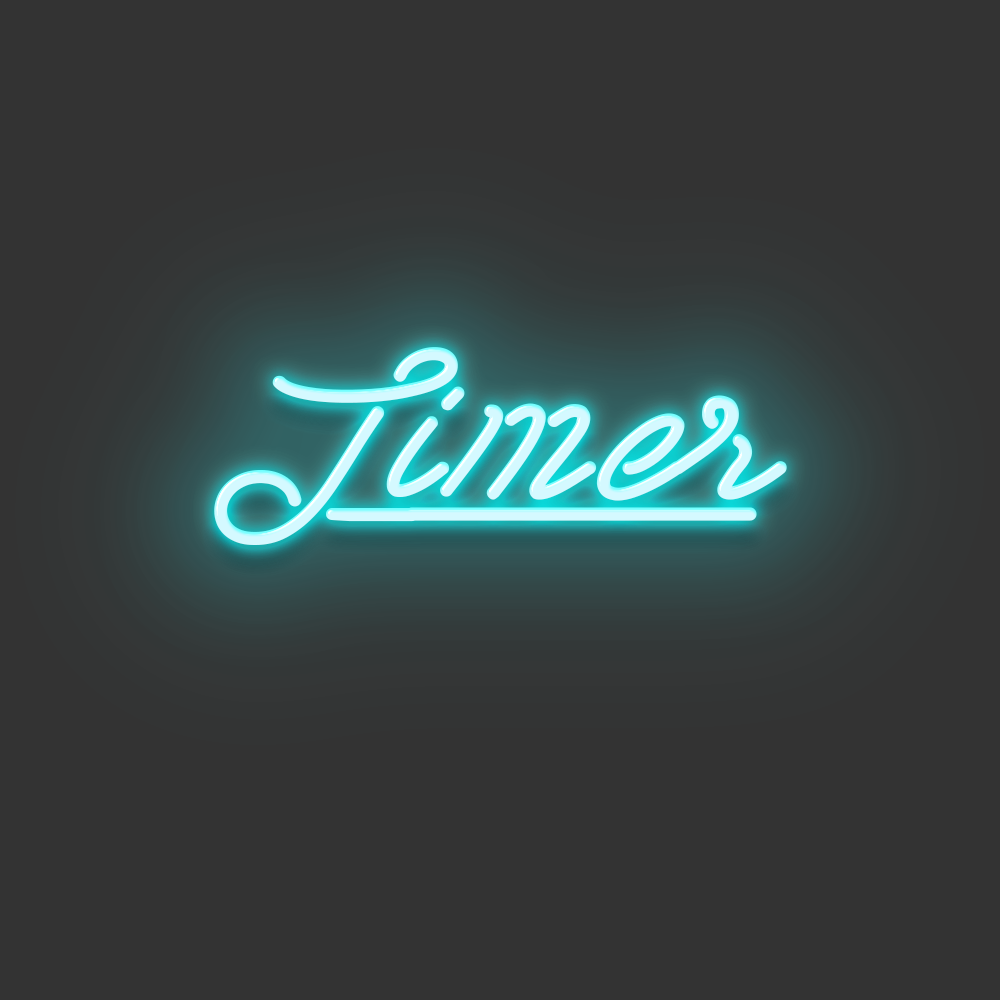
<style>
.page{position:relative;width:1000px;height:1000px;background:#333333}
.page>*{position:absolute;margin:0}
.t1{font:250px "LasEnterPersonalUseOnly";color:#d4f9ff}
</style>
<div class="page">
<p class="t1" style="left:214px;top:347px;width:573px;height:198px">Timer</p>
</div>
